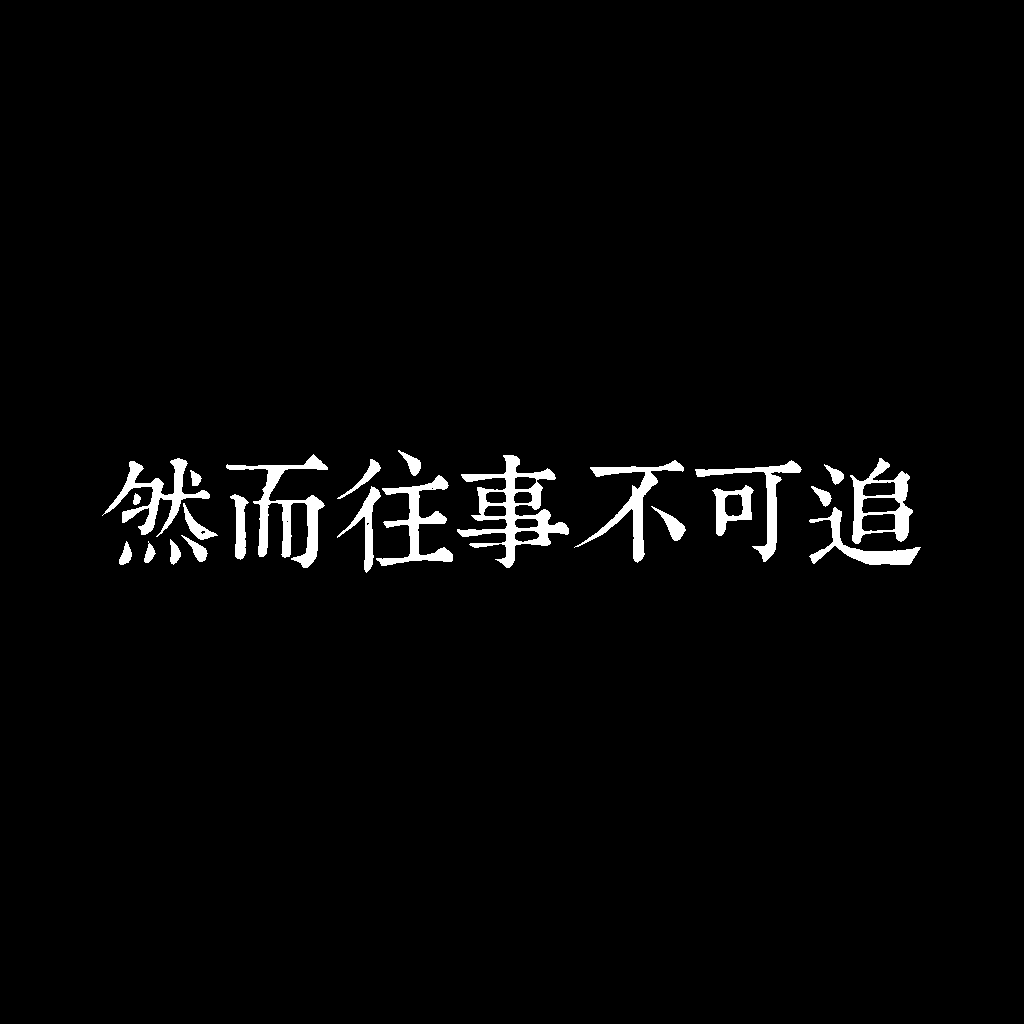
<style>
.page{position:relative;width:1024px;height:1024px;background:#000000}
.page>*{position:absolute;margin:0}
.t1{font:120px "TpldKhangXiDictTrial";letter-spacing:-0.02em;color:#ffffff}
</style>
<div class="page">
<p class="t1" style="left:102px;top:450px;width:819px;height:123px">然而往事不可追</p>
</div>
